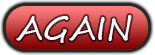
<style>
.page{position:relative;width:155px;height:55px}
.page>*{position:absolute;margin:0}
.t1{font:32px "SegoeScript";color:#ffffff}
</style>
<div class="page">
<p class="t1" style="left:16px;top:15px;width:116px;height:28px">AGAIN</p>
</div>
